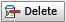
<style>
.page{position:relative;width:66px;height:22px}
.page>*{position:absolute;margin:0}
.t1{font:11.2px "Tahoma";letter-spacing:0.1em;color:#000000;scale:0.86 1}
</style>
<div class="page">
<p class="t1" style="left:25px;top:6px;width:32px;height:9px">Delete</p>
</div>
